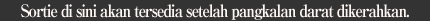
<style>
.page{position:relative;width:430px;height:21px;background:#333333}
.page>*{position:absolute;margin:0}
.t1{font:17px "RyuminPro-ExBold";letter-spacing:-0.08em;color:#fff7f3;scale:0.9 1}
</style>
<div class="page">
<p class="t1" style="left:21px;top:4px;width:388px;height:16px">Sortie di sini akan tersedia setelah pangkalan darat dikerahkan.</p>
</div>
